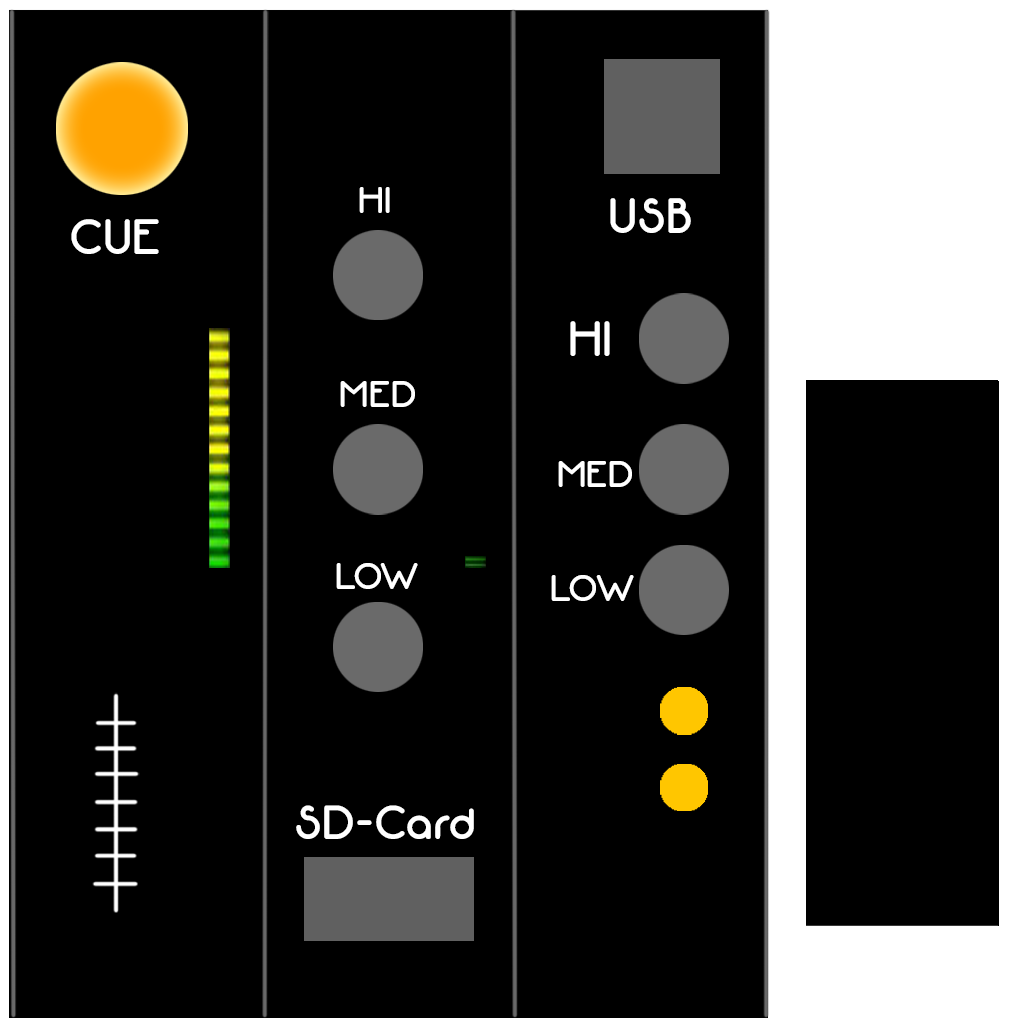
<style>
.page{position:relative;width:1024px;height:1024px;background:#000000}
.page>*{position:absolute;margin:0}
.t1{font:37.4px "Neon80s";color:#ffffff}
.t2{font:49.8px "Neon80s";color:#ffffff}
.t3{font:48px "Neon80s";color:#ffffff}
</style>
<div class="page">
<p class="t1" style="left:359px;top:187px;width:31px;height:26px">HI</p>
<p class="t2" style="left:610px;top:198px;width:81px;height:35px">USB</p>
<p class="t2" style="left:71px;top:219px;width:88px;height:35px">CUE</p>
<p class="t2" style="left:570px;top:321px;width:40px;height:35px">HI</p>
<p class="t1" style="left:340px;top:381px;width:75px;height:26px">MED</p>
<p class="t1" style="left:558px;top:461px;width:74px;height:26px">MED</p>
<p class="t1" style="left:336px;top:563px;width:82px;height:26px">LOW</p>
<p class="t1" style="left:551px;top:575px;width:83px;height:26px">LOW</p>
<p class="t3" style="left:296px;top:805px;width:178px;height:34px">SD-Card</p>
</div>
